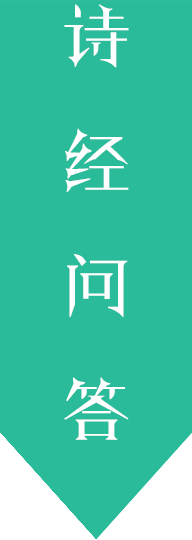
<style>
.page{position:relative;width:192px;height:540px;background:#2abb9b}
.page>*{position:absolute;margin:0}
.t1{font:71px "FZJTJW--GB1-0";color:#ffffff}
</style>
<div class="page">
<p class="t1" style="left:64px;top:4px;width:65px;height:436px">诗<br>经<br>问<br>答</p>
</div>
